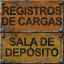
<style>
.page{position:relative;width:64px;height:64px}
.page>*{position:absolute;margin:0}
.t1{font:11.3px/10.7px "Arial-BoldMT";letter-spacing:-0.04em;color:#1b1d1b;text-transform:uppercase;scale:0.95 1}
.t2{font:11.3px/10.7px "Arial-BoldMT";letter-spacing:-0.02em;color:#1b1d1b;text-transform:uppercase;scale:0.95 1}
</style>
<div class="page">
<p class="t1" style="left:2px;top:6px;width:60px;height:20px;text-align:center">registros<br>de cargaS</p>
<p class="t2" style="left:5px;top:37px;width:54px;height:20px;text-align:center">Sala de<br>depósito</p>
</div>
